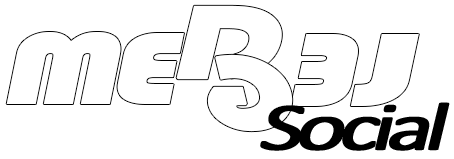
<style>
.page{position:relative;width:454px;height:159px;background:#ffffff}
.page>*{position:absolute;margin:0}
.t1{font:108.6px "Bauhaus93";letter-spacing:-0.079em;color:#ffffff;scale:1.34 1}
.t2{font:68.3px "Calibri";letter-spacing:-0.099em;color:#000000;font-weight:bold;font-style:italic;scale:1.37 1}
</style>
<div class="page">
<p class="t1" style="left:6px;top:32px;width:178px;height:72px">ME</p>
<p class="t2" style="left:260px;top:102px;width:190px;height:49px">Social</p>
</div>
